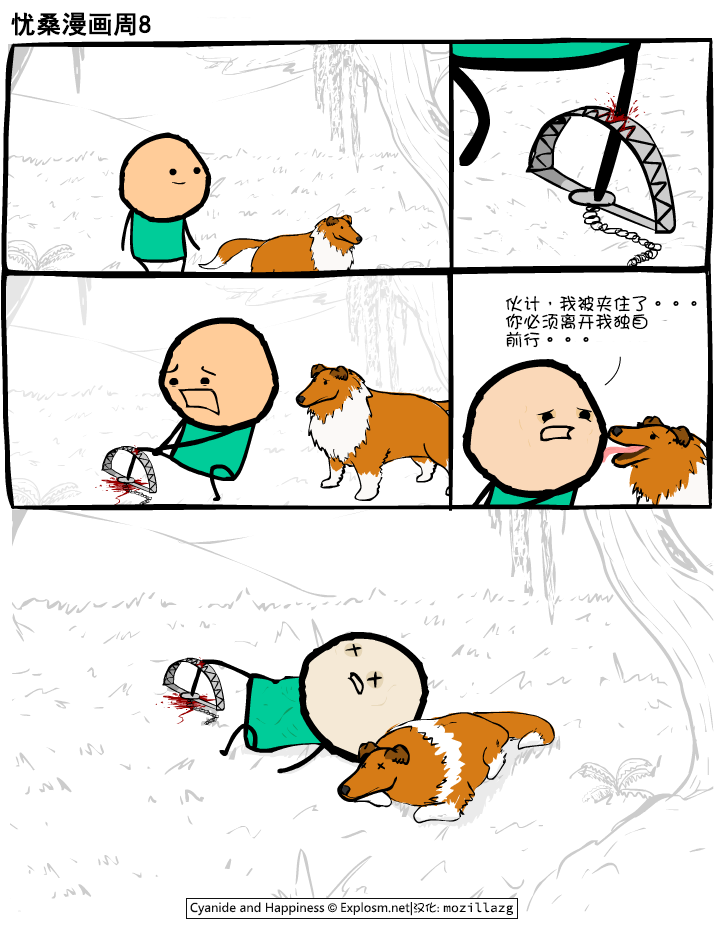
<style>
.page{position:relative;width:720px;height:945px;background:#ffffff}
.page>*{position:absolute;margin:0}
.t1{font:25px "SimHei";color:#000000;font-weight:bold}
.t2{font:18px/18px "DFGirl";color:#000000}
</style>
<div class="page">
<p class="t1" style="left:11px;top:12px;width:140px;height:24px">忧桑漫画周8</p>
<p class="t2" style="left:505px;top:295px;width:192px;height:53px">伙计，我被夹住了。。。<br>你必须离开我独自<br>前行。。。</p>
</div>
